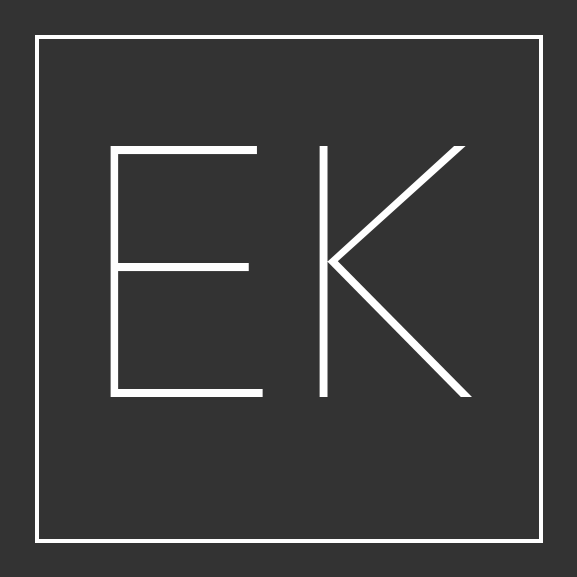
<style>
.page{position:relative;width:577px;height:577px;background:#333333}
.page>*{position:absolute;margin:0}
.t1{font:355px "AvenirNext-UltraLight";color:#ffffff}
</style>
<div class="page">
<p class="t1" style="left:110px;top:146px;width:362px;height:251px">EK</p>
</div>
